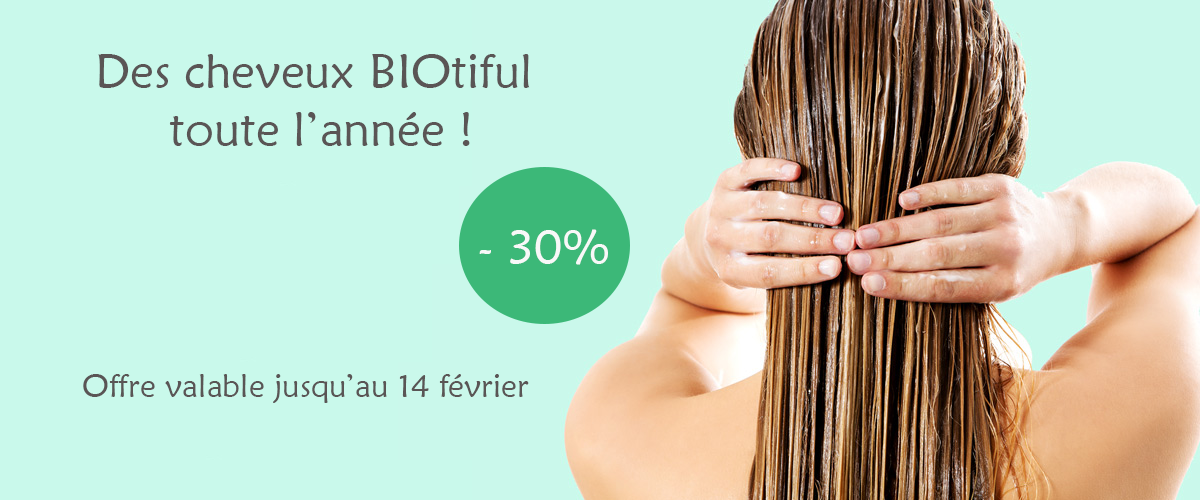
<style>
.page{position:relative;width:1200px;height:500px;background:#c9f9eb}
.page>*{position:absolute;margin:0}
.t1{font:48px "MaiandraGD-Regular";color:#5a5555}
.t2{font:48px "MaiandraGD-Regular";color:#f8f8f8}
.t3{font:32px "MaiandraGD-Regular";color:#5a5555}
</style>
<div class="page">
<p class="t1" style="left:98px;top:54px;width:432px;height:92px;text-align:center">Des cheveux BIOtiful <br>toute l’année !</p>
<p class="t2" style="left:479px;top:229px;width:129px;height:36px">- 30%</p>
<p class="t3" style="left:83px;top:374px;width:446px;height:29px">Offre valable jusqu’au 14 février</p>
</div>
